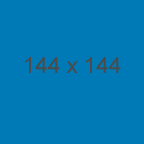
<style>
.page{position:relative;width:144px;height:144px;background:#007ab6}
.page>*{position:absolute;margin:0}
.t1{font:22.4px "ArialMT";color:#4b4b4b}
</style>
<div class="page">
<p class="t1" style="left:25px;top:56px;width:96px;height:17px">144 x 144</p>
</div>
